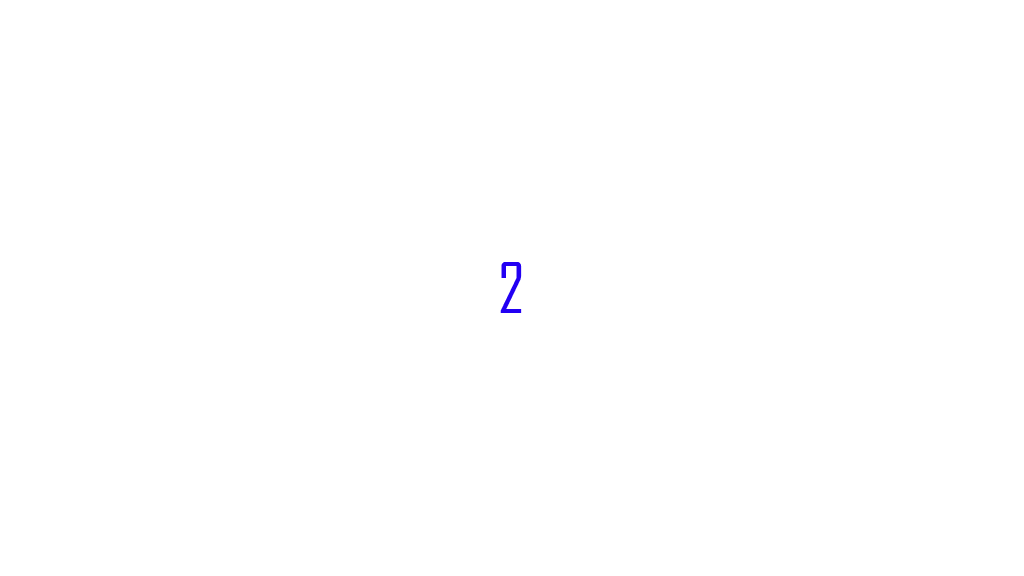
<style>
.page{position:relative;width:1024px;height:576px;background:#ffffff}
.page>*{position:absolute;margin:0}
.t1{font:66.7px "AgencyFB-Reg";color:#2200f3}
</style>
<div class="page">
<p class="t1" style="left:500px;top:262px;width:22px;height:51px">2</p>
</div>
